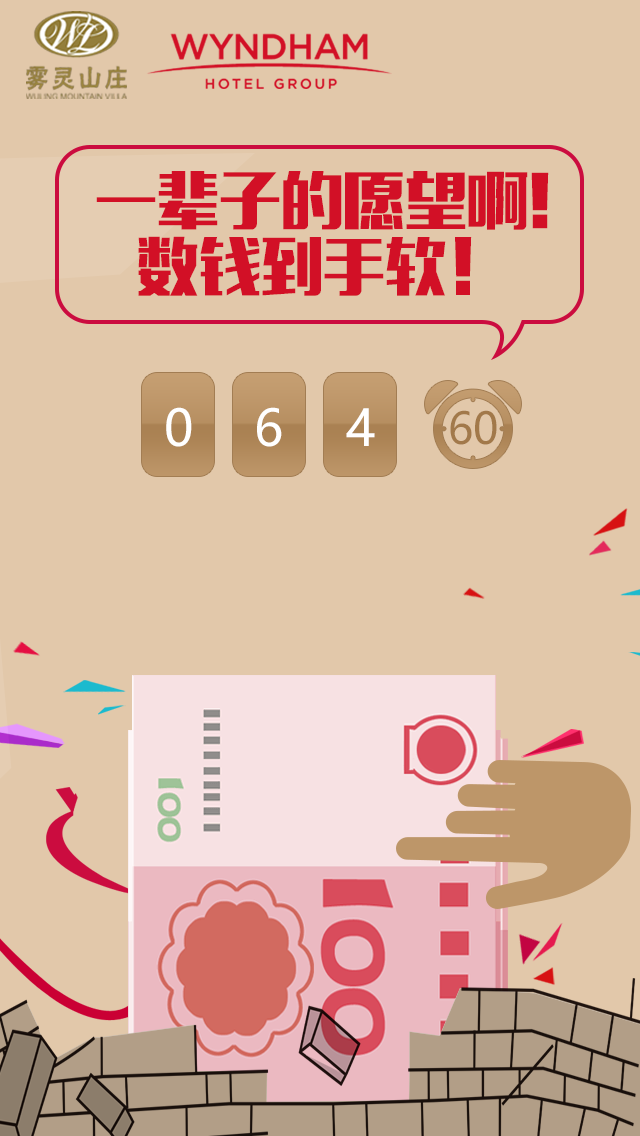
<style>
.page{position:relative;width:640px;height:1136px;background:#e2c8aa}
.page>*{position:absolute;margin:0}
.t1{font:61.9px/66px "MFLiHei_Noncommercial-Regular";color:#d21026}
.t2{font:50px "MicrosoftYaHei";color:#ffffff}
.t3{font:43.3px "MicrosoftYaHei";color:#a2794a}
</style>
<div class="page">
<p class="t1" style="left:96px;top:171px;width:453px;height:125px;text-align:center">一辈子的愿望啊!<br>数钱到手软！</p>
<p class="t2" style="left:166px;top:407px;width:26px;height:40px">0</p>
<p class="t2" style="left:257px;top:407px;width:25px;height:40px">6</p>
<p class="t2" style="left:346px;top:408px;width:29px;height:38px">4</p>
<p class="t3" style="left:450px;top:410px;width:47px;height:35px">60</p>
</div>
